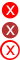
<style>
.page{position:relative;width:20px;height:60px;background:#ffffff}
.page>*{position:absolute;margin:0}
.t1{font:18px "ArialMT";color:#ffffff}
.t2{font:18px "ArialMT";color:#ff0000}
</style>
<div class="page">
<p class="t1" style="left:6px;top:5px;width:9px;height:10px">x</p>
<p class="t1" style="left:6px;top:25px;width:9px;height:10px">x</p>
<p class="t2" style="left:6px;top:45px;width:9px;height:10px">x</p>
</div>
